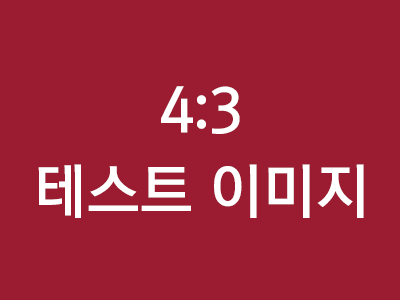
<style>
.page{position:relative;width:400px;height:300px;background:#9b1b31}
.page>*{position:absolute;margin:0}
.t1{font:60px/80px "KoreanGD15-R";color:#ffffff}
</style>
<div class="page">
<p class="t1" style="left:38px;top:86px;width:326px;height:132px;text-align:center">4:3<br>테스트 이미지</p>
</div>
